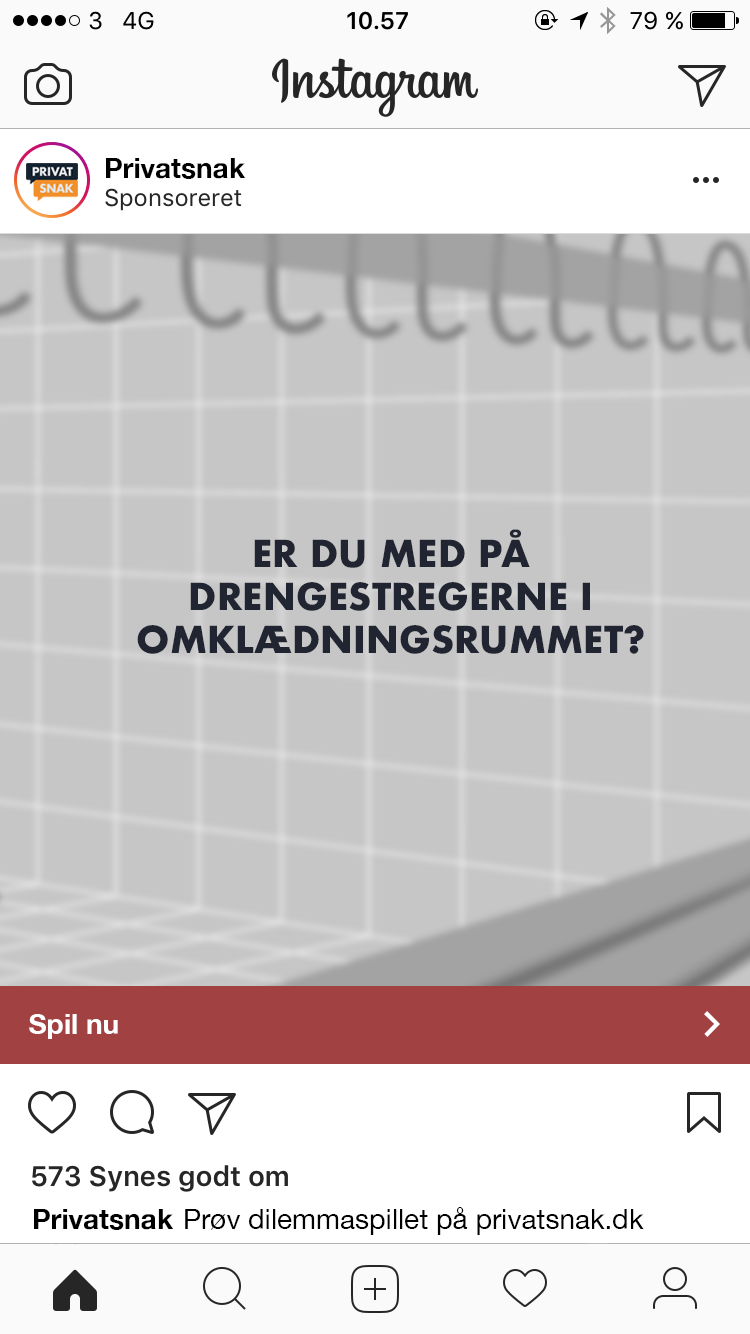
<style>
.page{position:relative;width:750px;height:1334px;background:#c6c6c6}
.page>*{position:absolute;margin:0}
.t1{font:28px "HelveticaNeue-Bold";color:#000000}
.t2{font:36px "Futura-Bold";color:#212531}
.t3{font:28px "HelveticaNeue-Bold";color:#ffffff}
.t4{font:28px "HelveticaNeue";color:#000000}
</style>
<div class="page">
<p class="t1" style="left:106px;top:158px;width:140px;height:21px">Privatsnak</p>
<p class="t2" style="left:137px;top:529px;width:507px;height:125px;text-align:center">ER DU MED PÅ <br>DRENGESTREGERNE I OMKLÆDNINGSRUMMET?</p>
<p class="t3" style="left:29px;top:1014px;width:89px;height:25px">Spil nu</p>
<p class="t1" style="left:34px;top:1209px;width:140px;height:21px">Privatsnak</p>
<p class="t4" style="left:185px;top:1207px;width:459px;height:28px">Prøv dilemmaspillet på privatsnak.dk</p>
</div>
